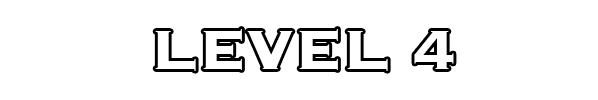
<style>
.page{position:relative;width:598px;height:100px;background:#ffffff}
.page>*{position:absolute;margin:0}
.t1{font:72px "Copperplate-Bold";color:#ffffff}
</style>
<div class="page">
<p class="t1" style="left:155px;top:29px;width:299px;height:42px">LEVEL 4</p>
</div>
